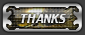
<style>
.page{position:relative;width:85px;height:35px}
.page>*{position:absolute;margin:0}
.t1{font:13px "Biathlon";color:#e7e7e7}
</style>
<div class="page">
<p class="t1" style="left:20px;top:14px;width:46px;height:9px">THANKS</p>
</div>
